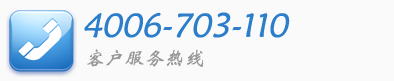
<style>
.page{position:relative;width:394px;height:81px;background:#fafafa}
.page>*{position:absolute;margin:0}
.t1{font:34px "STXinwei";color:#2c7ecb;font-style:italic}
.t2{font:20px "STXinwei";color:#999999;font-style:italic}
</style>
<div class="page">
<p class="t1" style="left:84px;top:12px;width:206px;height:26px">4006-703-110</p>
<p class="t2" style="left:87px;top:49px;width:117px;height:18px">客户服务热线</p>
</div>
